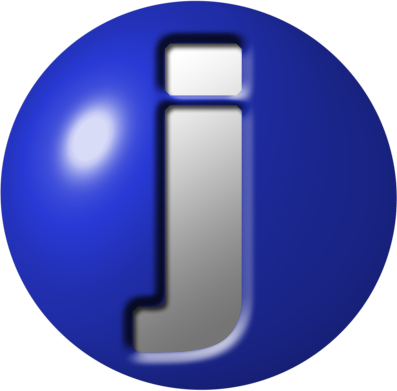
<style>
.page{position:relative;width:397px;height:391px;background:#ffffff}
.page>*{position:absolute;margin:0}
.t1{font:318px "Helvetica-Bold";color:#ffffff;font-weight:bold;scale:1.5 1}
</style>
<div class="page">
<p class="t1" style="left:132px;top:43px;width:110px;height:310px">j</p>
</div>
